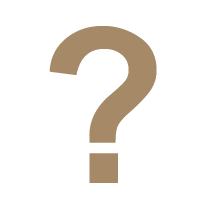
<style>
.page{position:relative;width:200px;height:200px;background:#ffffff}
.page>*{position:absolute;margin:0}
.t1{font:332.7px "BrowalliaUPC-Bold";color:#a68a68;scale:0.96 1}
</style>
<div class="page">
<p class="t1" style="left:49px;top:26px;width:108px;height:157px">?</p>
</div>
